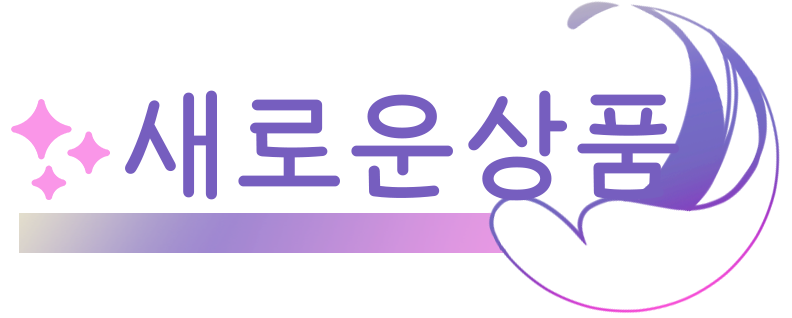
<style>
.page{position:relative;width:792px;height:318px;background:#ffffff}
.page>*{position:absolute;margin:0}
.t1{font:119.6px "MapoPeacefull";color:#765ebf;font-weight:bold}
</style>
<div class="page">
<p class="t1" style="left:125px;top:90px;width:554px;height:111px">새로운상품</p>
</div>
